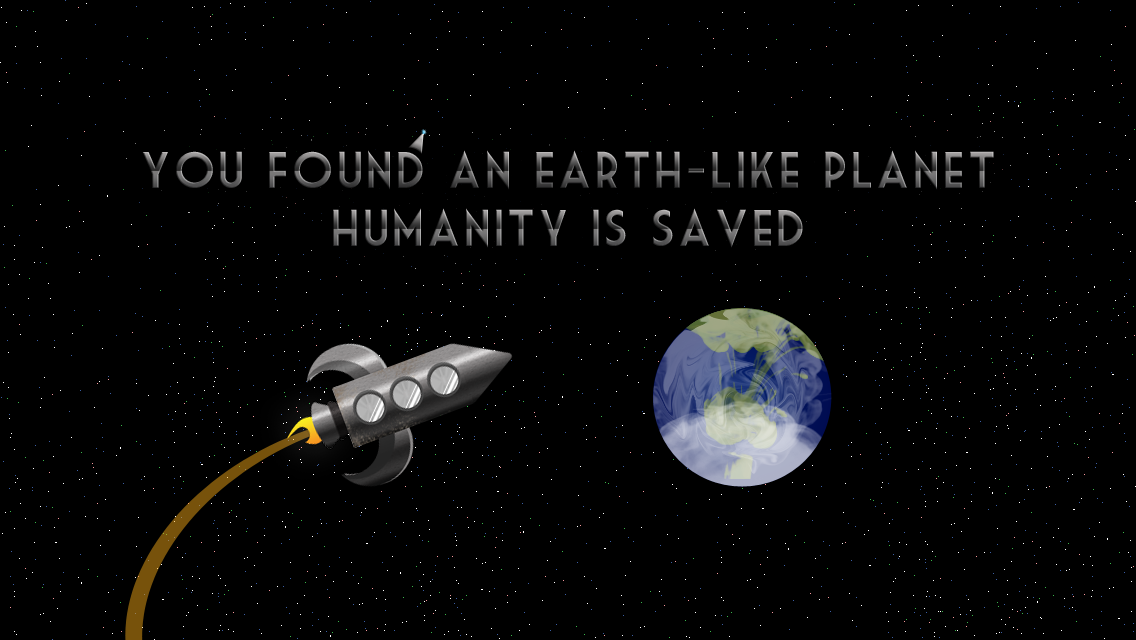
<style>
.page{position:relative;width:1136px;height:640px;background:#000000}
.page>*{position:absolute;margin:0}
.t1{font:50px "MarketDeco";letter-spacing:0.04em}
</style>
<div class="page">
<p class="t1" style="left:142px;top:150px;width:852px;height:40px">You found an earth-like planet</p>
<p class="t1" style="left:333px;top:208px;width:470px;height:40px">humanity is saved</p>
</div>
